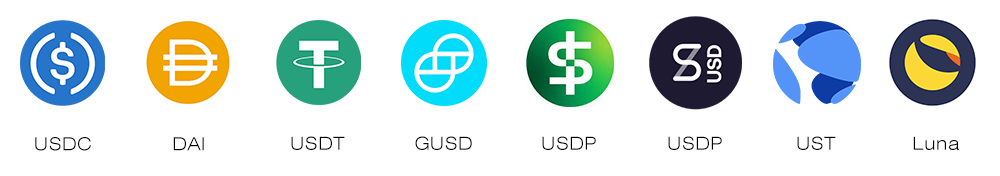
<style>
.page{position:relative;width:1000px;height:176px;background:#ffffff}
.page>*{position:absolute;margin:0}
.t1{font:18px "Swiss721BT-LightExtended";letter-spacing:0.024em;color:#010000}
</style>
<div class="page">
<p class="t1" style="left:35px;top:137px;width:56px;height:14px">USDC</p>
<p class="t1" style="left:173px;top:137px;width:31px;height:14px">DAI</p>
<p class="t1" style="left:291px;top:136px;width:54px;height:14px">USDT</p>
<p class="t1" style="left:415px;top:136px;width:57px;height:14px">GUSD</p>
<p class="t1" style="left:542px;top:136px;width:54px;height:14px">USDP</p>
<p class="t1" style="left:668px;top:136px;width:54px;height:14px">USDP</p>
<p class="t1" style="left:797px;top:136px;width:39px;height:14px">UST</p>
<p class="t1" style="left:913px;top:136px;width:46px;height:14px">Luna</p>
</div>
